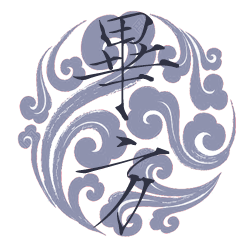
<style>
.page{position:relative;width:250px;height:250px;background:#ffffff}
.page>*{position:absolute;margin:0}
.t1{font:123.9px "FZSJSFW--GB1-0";color:#303243}
</style>
<div class="page">
<p class="t1" style="left:73px;top:12px;width:107px;height:224px">毕方</p>
</div>
